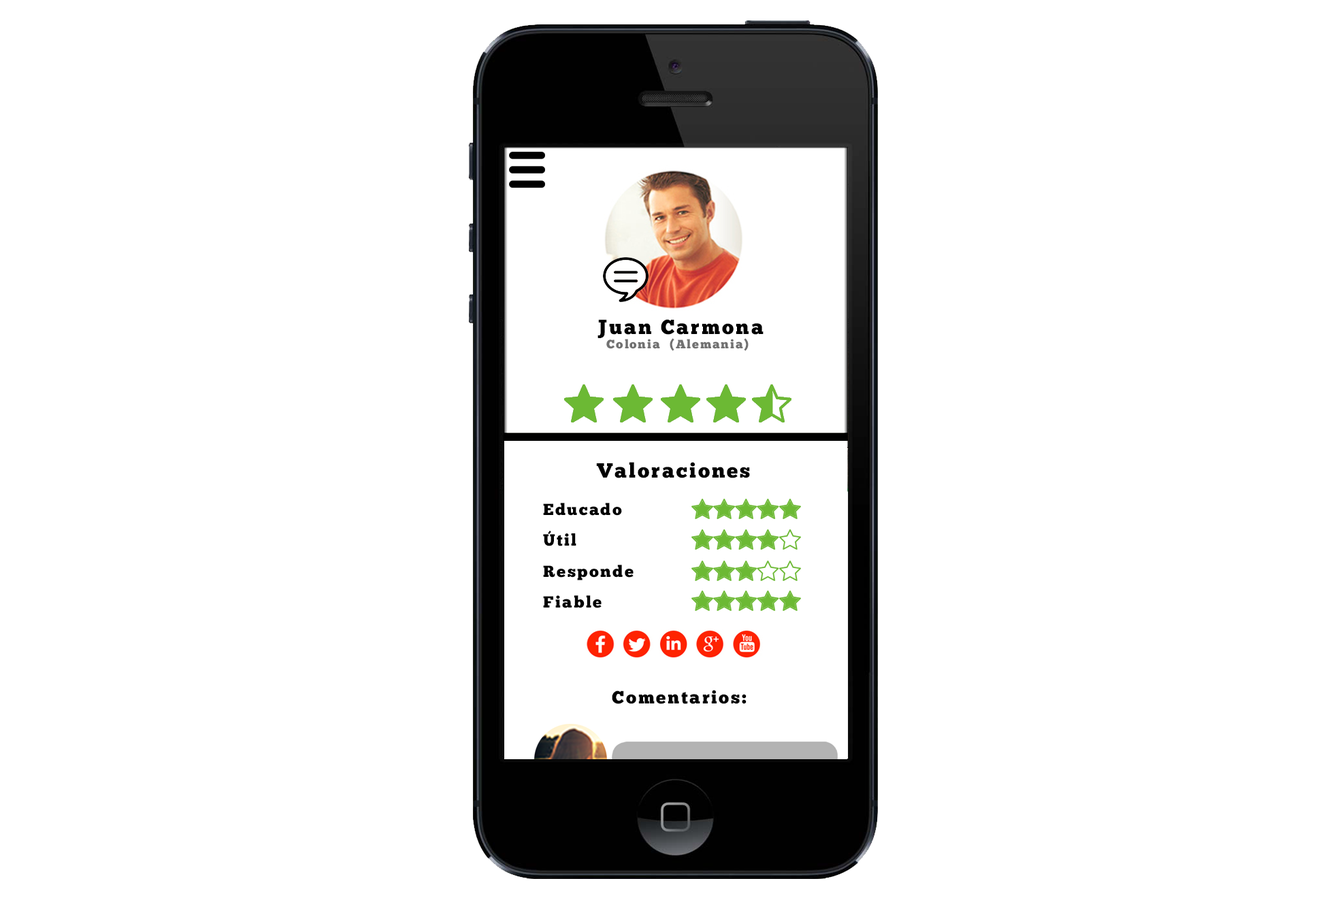
<style>
.page{position:relative;width:1327px;height:898px;background:#ffffff}
.page>*{position:absolute;margin:0}
.t1{font:20.4px "ChunkFive-Roman";letter-spacing:0.1em;color:#000000}
.t2{font:12.3px "ChunkFive-Roman";letter-spacing:0.1em;color:#717171}
.t3{font:16.1px "ChunkFive-Roman";letter-spacing:0.1em;color:#000000}
.t4{font:16.3px "ChunkFive-Roman";letter-spacing:0.1em;color:#000000}
.t5{font:17.7px "ChunkFive-Roman";letter-spacing:0.1em;color:#000000}
</style>
<div class="page">
<p class="t1" style="left:598px;top:319px;width:166px;height:19px">Juan Carmona</p>
<p class="t2" style="left:606px;top:338px;width:143px;height:13px">Colonia  (Alemania)</p>
<p class="t1" style="left:596px;top:462px;width:154px;height:16px">Valoraciones</p>
<p class="t3" style="left:543px;top:503px;width:79px;height:13px">Educado</p>
<p class="t4" style="left:543px;top:530px;width:33px;height:17px">Útil</p>
<p class="t3" style="left:543px;top:565px;width:91px;height:16px">Responde</p>
<p class="t3" style="left:543px;top:596px;width:59px;height:12px">Fiable</p>
<p class="t5" style="left:612px;top:690px;width:135px;height:14px">Comentarios:</p>
</div>
